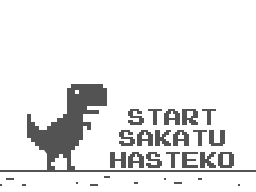
<style>
.page{position:relative;width:256px;height:192px;background:#ffffff}
.page>*{position:absolute;margin:0}
.t1{font:18px "PressStart2P";color:#535353}
</style>
<div class="page">
<p class="t1" style="left:110px;top:109px;width:124px;height:59px;text-align:center">START<br>SAKATU<br>HASTEKO</p>
</div>
